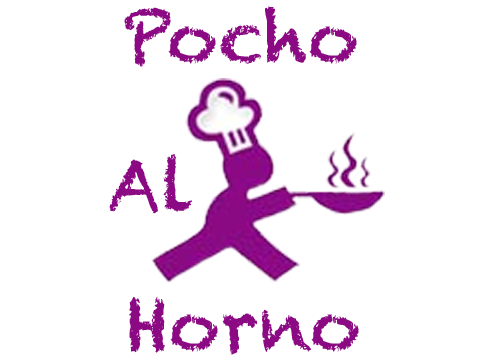
<style>
.page{position:relative;width:504px;height:360px;background:#ffffff}
.page>*{position:absolute;margin:0}
.t1{font:70.7px "Chalkduster";color:#8b0983}
</style>
<div class="page">
<p class="t1" style="left:124px;top:6px;width:233px;height:61px">Pocho</p>
<p class="t1" style="left:109px;top:154px;width:83px;height:60px">Al</p>
<p class="t1" style="left:129px;top:296px;width:230px;height:59px">Horno</p>
</div>
